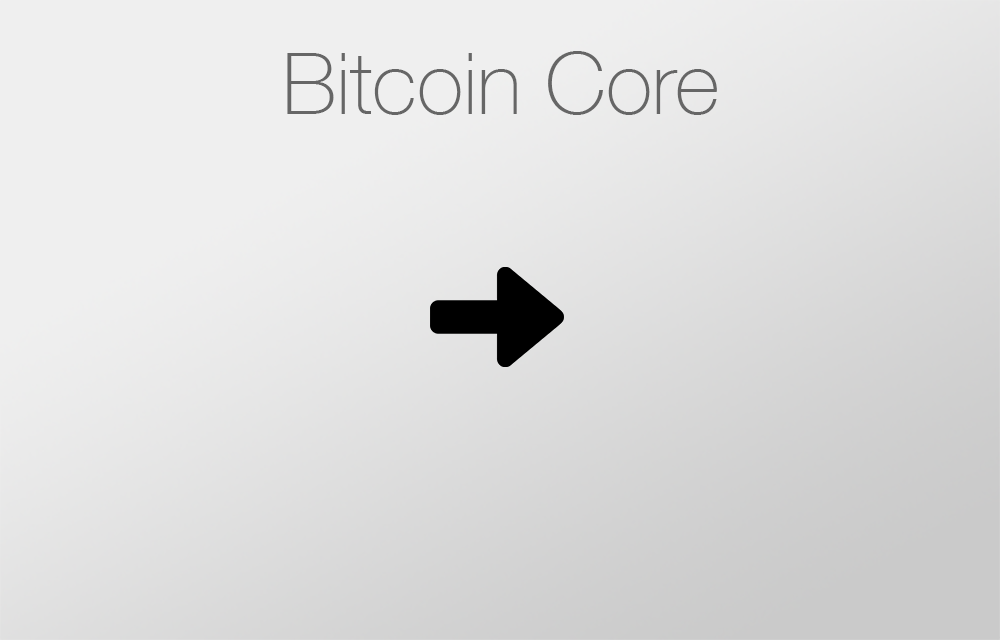
<style>
.page{position:relative;width:1000px;height:640px}
.page>*{position:absolute;margin:0}
.t1{font:85.7px "HelveticaNeue-Thin";color:#666666}
</style>
<div class="page">
<p class="t1" style="left:287px;top:51px;width:430px;height:64px">Bitcoin Core</p>
</div>
